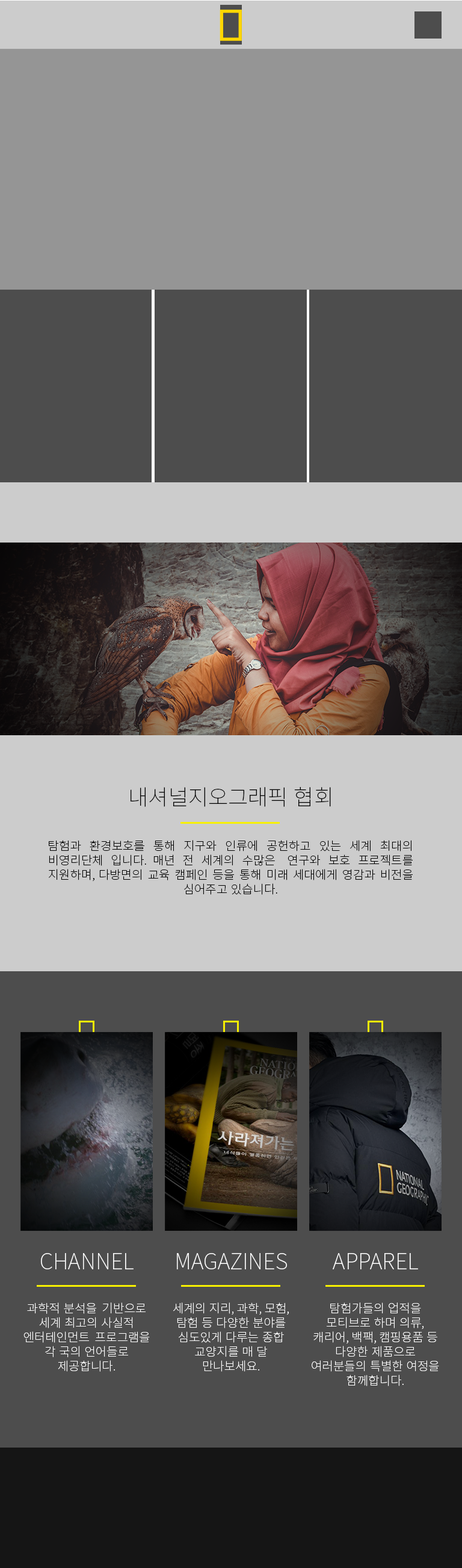
<style>
.page{position:relative;width:462px;height:1568px;background:#4d4d4d}
.page>*{position:absolute;margin:0}
.t1{font:21.7px "NotoSansKR-Thin";color:#000000}
.t2{font:12px "NotoSansKR-Thin";color:#000000}
.t3{font:21.7px "NotoSansKR-Thin";color:#ffffff}
.t4{font:12px "NotoSansKR-Thin";color:#ffffff}
</style>
<div class="page">
<p class="t1" style="left:131px;top:787px;width:200px;height:20px">내셔널지오그래픽 협회</p>
<p class="t2" style="left:49px;top:840px;width:364px;height:55px;text-align:justify">탐험과 환경보호를 통해 지구와 인류에 공헌하고 있는 세계 최대의 비영리단체 입니다. 매년 전 세계의 수많은  연구와 보호 프로젝트를 지원하며, 다방면의 교육 캠페인 등을 통해 미래 세대에게 영감과 비전을 심어주고 있습니다.</p>
<p class="t3" style="left:41px;top:1253px;width:93px;height:16px">CHANNEL</p>
<p class="t3" style="left:177px;top:1253px;width:110px;height:16px">MAGAZINES</p>
<p class="t3" style="left:333px;top:1253px;width:85px;height:16px">APPAREL</p>
<p class="t4" style="left:23px;top:1302px;width:127px;height:70px;text-align:center">과학적 분석을  기반으로 세계 최고의 사실적 엔터테인먼트  프로그램을 각 국의 언어들로 제공합니다.</p>
<p class="t4" style="left:173px;top:1302px;width:116px;height:70px;text-align:center">세계의 지리, 과학, 모험, 탐험 등 다양한 분야를 심도있게 다루는 종합 교양지를 매 달 만나보세요.</p>
<p class="t4" style="left:312px;top:1302px;width:128px;height:84px;text-align:center">탐험가들의 업적을 모티브로 하며 의류, 캐리어, 백팩, 캠핑용품 등 다양한 제품으로 여러분들의 특별한 여정을 함께합니다.</p>
</div>
